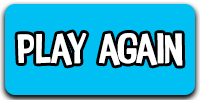
<style>
.page{position:relative;width:200px;height:100px;background:#00bff3}
.page>*{position:absolute;margin:0}
.t1{font:43px "InsideOut";color:#ffffff}
</style>
<div class="page">
<p class="t1" style="left:17px;top:32px;width:166px;height:34px">play again</p>
</div>
